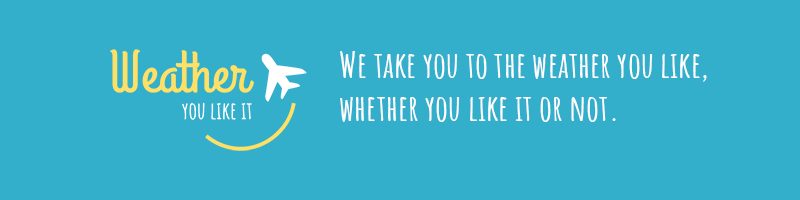
<style>
.page{position:relative;width:800px;height:200px;background:#33afcc}
.page>*{position:absolute;margin:0}
.t1{font:36px "AmaticSC-Bold";color:#ffffff}
</style>
<div class="page">
<p class="t1" style="left:340px;top:51px;width:367px;height:71px">We take you to the weather you like,<br>whether you like it or not.</p>
</div>
